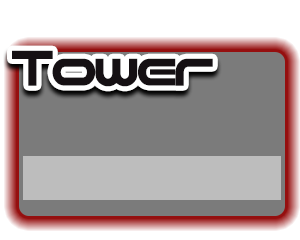
<style>
.page{position:relative;width:300px;height:240px;background:#7b7b7b}
.page>*{position:absolute;margin:0}
.t1{font:60px "NicoKaku";letter-spacing:-0.1em;color:#151013}
</style>
<div class="page">
<p class="t1" style="left:12px;top:50px;width:201px;height:37px">Tower</p>
</div>
